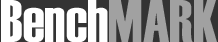
<style>
.page{position:relative;width:218px;height:42px;background:#a1a1a1}
.page>*{position:absolute;margin:0}
.t1{font:60.1px "Haettenschweiler";color:#ffffff}
.t2{font:60.1px "Haettenschweiler";color:#a1a1a1}
</style>
<div class="page">
<p class="t1" style="left:1px;top:0px;width:216px;height:43px">Bench<span class="t2">MARK</span></p>
</div>
